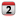
<style>
.page{position:relative;width:17px;height:17px;background:#ffffff}
.page>*{position:absolute;margin:0}
.t1{font:9.6px "BookAntiqua";color:#000000;font-weight:bold}
</style>
<div class="page">
<p class="t1" style="left:6px;top:6px;width:6px;height:8px">2</p>
</div>
